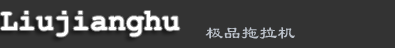
<style>
.page{position:relative;width:395px;height:48px;background:#333333}
.page>*{position:absolute;margin:0}
.t1{font:30px "CourierNewPS-BoldMT";color:#ffffff}
.t2{font:18px "LiSu";color:#bac0c9}
</style>
<div class="page">
<p class="t1" style="left:0px;top:11px;width:180px;height:26px">Liujianghu</p>
<p class="t2" style="left:205px;top:27px;width:90px;height:12px">极品拖拉机</p>
</div>
